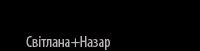
<style>
.page{position:relative;width:200px;height:51px;background:#000000}
.page>*{position:absolute;margin:0}
.t1{font:16px "MyriadPro-Cond";color:#b9b5b5}
</style>
<div class="page">
<p class="t1" style="left:26px;top:36px;width:84px;height:14px">Світлана+Назар</p>
</div>
